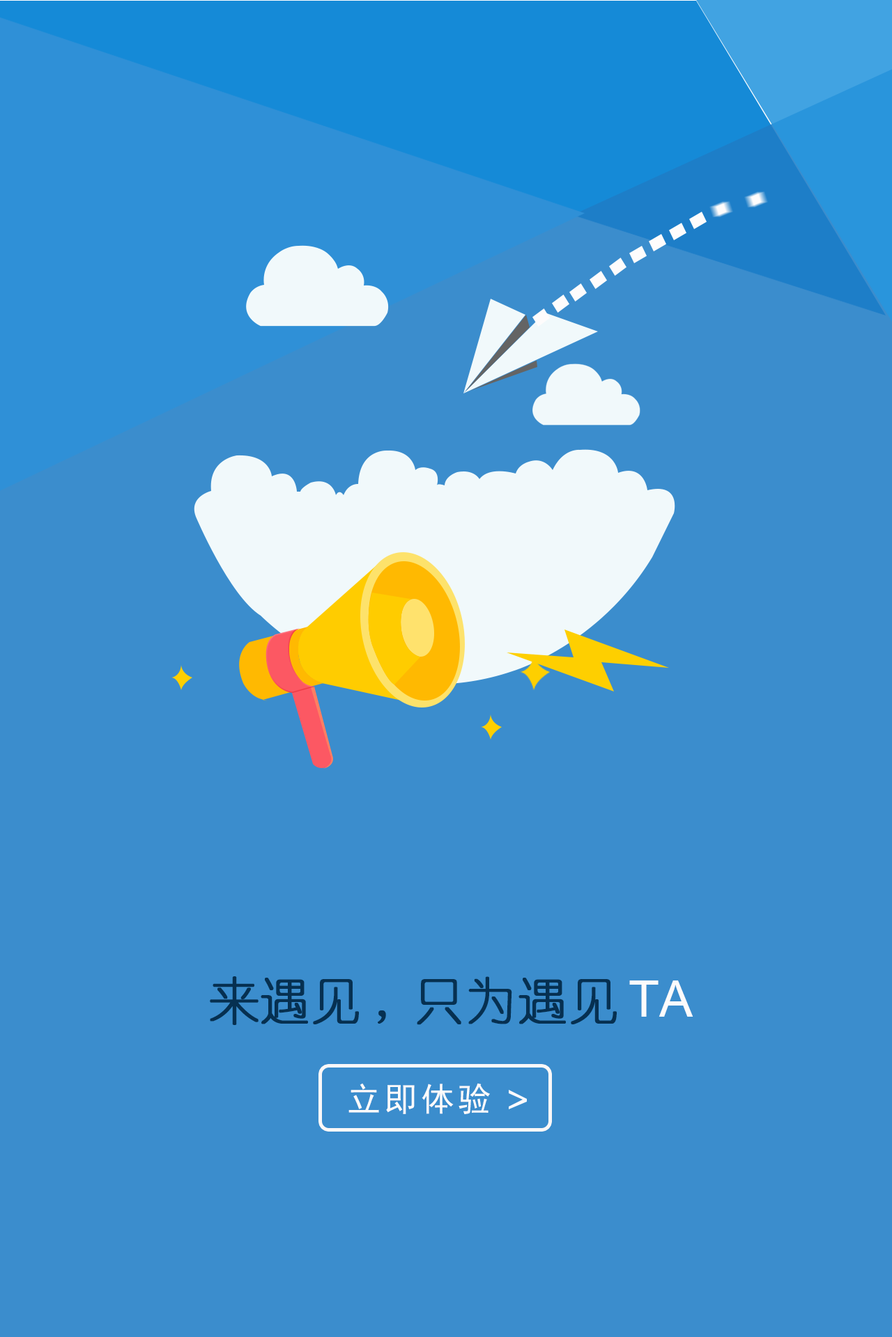
<style>
.page{position:relative;width:892px;height:1337px;background:#3b8dcd}
.page>*{position:absolute;margin:0}
.t1{font:50.2px "YouYuan";color:#063051;font-weight:bold}
.t2{font:50.2px "ArialMT";color:#fdfbfb}
.t3{font:33.4px "SimHei";letter-spacing:0.1em;color:#fdfbfb}
</style>
<div class="page">
<p class="t1" style="left:210px;top:977px;width:406px;height:48px">来遇见,只为遇见</p>
<p class="t2" style="left:629px;top:981px;width:64px;height:36px">TA</p>
<p class="t3" style="left:348px;top:1083px;width:142px;height:32px">立即体验</p>
</div>
